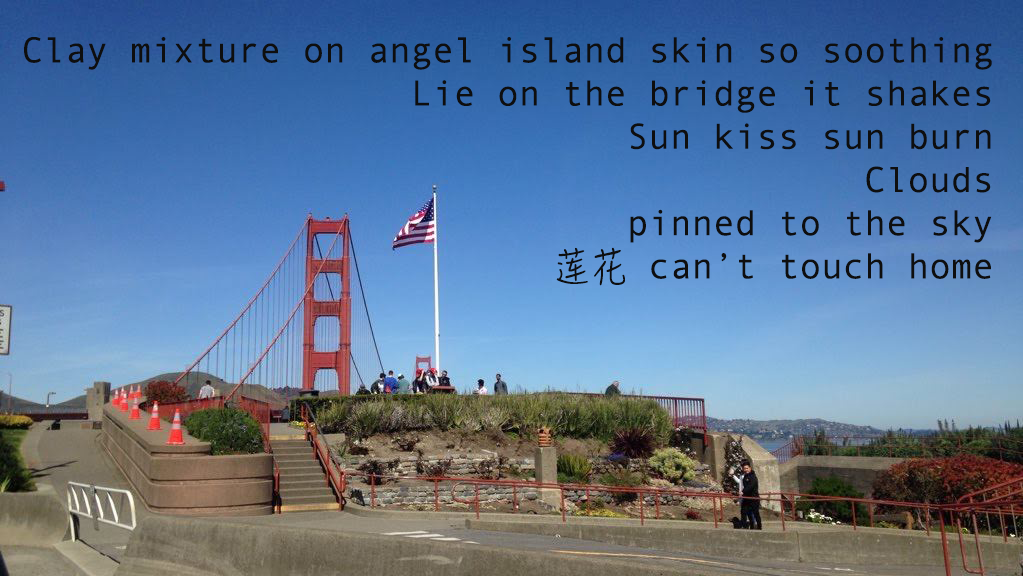
<style>
.page{position:relative;width:1023px;height:576px}
.page>*{position:absolute;margin:0}
.t1{font:36px "AndaleMono";color:#0e0e0e}
.t2{font:36px "HanziPenSC-W3";color:#0e0e0e}
</style>
<div class="page">
<p class="t1" style="left:24px;top:37px;width:968px;height:249px;text-align:right">Clay mixture on angel island skin so soothing<br>Lie on the bridge it shakes<br>Sun kiss sun burn<br>Clouds<br>pinned to the sky<br><span class="t2">莲花</span> can’t touch home</p>
</div>
